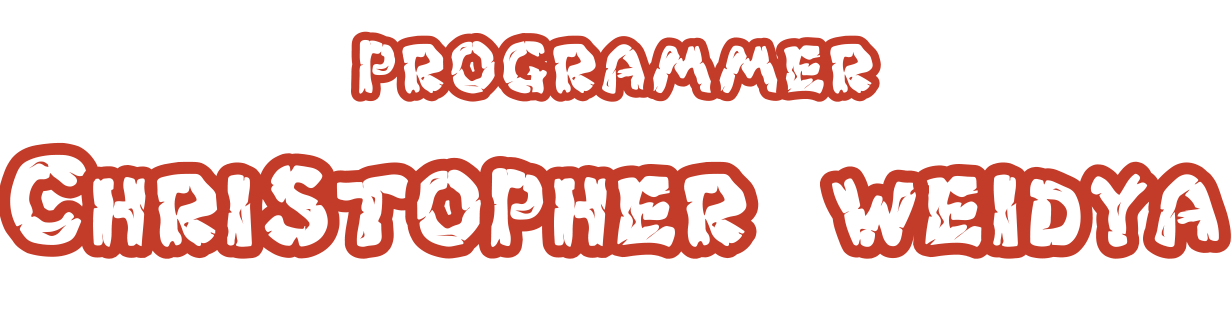
<style>
.page{position:relative;width:1232px;height:326px;background:#ffffff}
.page>*{position:absolute;margin:0}
.t1{font:103.1px "Chlorinar-Regular";color:#c33b29}
.t2{font:151.2px "Chlorinar-Regular";color:#c33b29}
</style>
<div class="page">
<p class="t1" style="left:351px;top:31px;width:530px;height:71px">programmer</p>
<p class="t2" style="left:0px;top:142px;width:1231px;height:117px">Christopher weidya</p>
</div>
